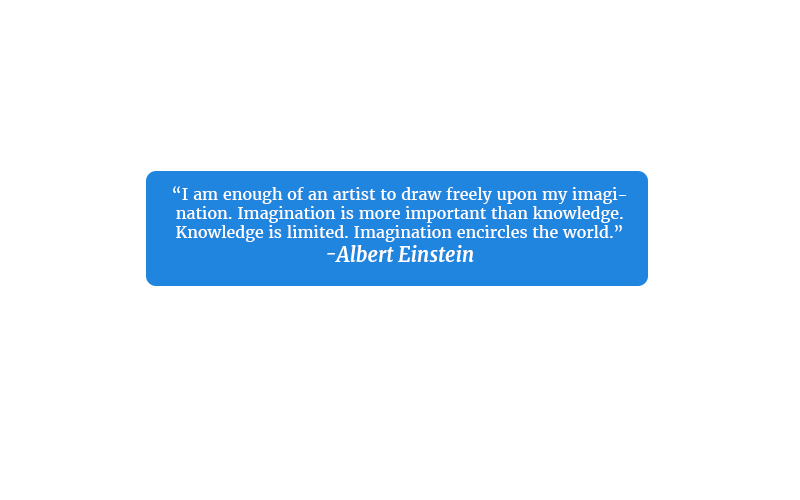
<style>
.page{position:relative;width:800px;height:500px;background:#ffffff}
.page>*{position:absolute;margin:0}
.t1{font:16px "Merriweather-Regular";color:#ffffff}
.t2{font:20px "Merriweather-BoldItalic";color:#ffffff}
</style>
<div class="page">
<p class="t1" style="left:173px;top:186px;width:454px;height:76px;text-align:center">“I am enough of an artist to draw freely upon my imagination. Imagination is more important than knowledge. Knowledge is limited. Imagination encircles the world.” <br><span class="t2">-Albert Einstein</span></p>
</div>
